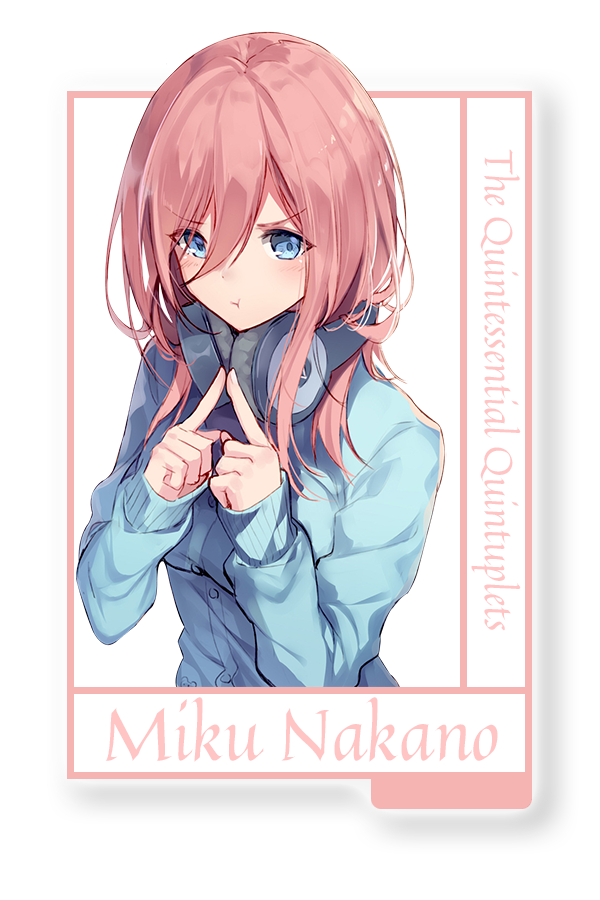
<style>
.page{position:relative;width:600px;height:900px;background:#ffffff}
.page>*{position:absolute;margin:0}
.t1{font:39px "Quintessential-Regular";color:#ffc5c5}
.t2{font:70.1px "Quintessential-Regular";color:#ffc5c5}
</style>
<div class="page">
<p class="t1" style="left:471px;top:149px;width:50px;height:482px;rotate:90deg">The Quintessential Quintuplets</p>
<p class="t2" style="left:105px;top:697px;width:393px;height:65px">Miku Nakano</p>
</div>
